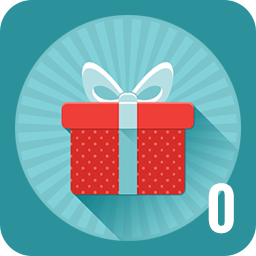
<style>
.page{position:relative;width:256px;height:256px;background:#2b919a}
.page>*{position:absolute;margin:0}
.t1{font:56.9px "FjallaOne-Regular";letter-spacing:-0.03em;color:#ffffff;text-transform:uppercase;font-weight:bold}
</style>
<div class="page">
<p class="t1" style="left:208px;top:183px;width:26px;height:51px">0</p>
</div>
